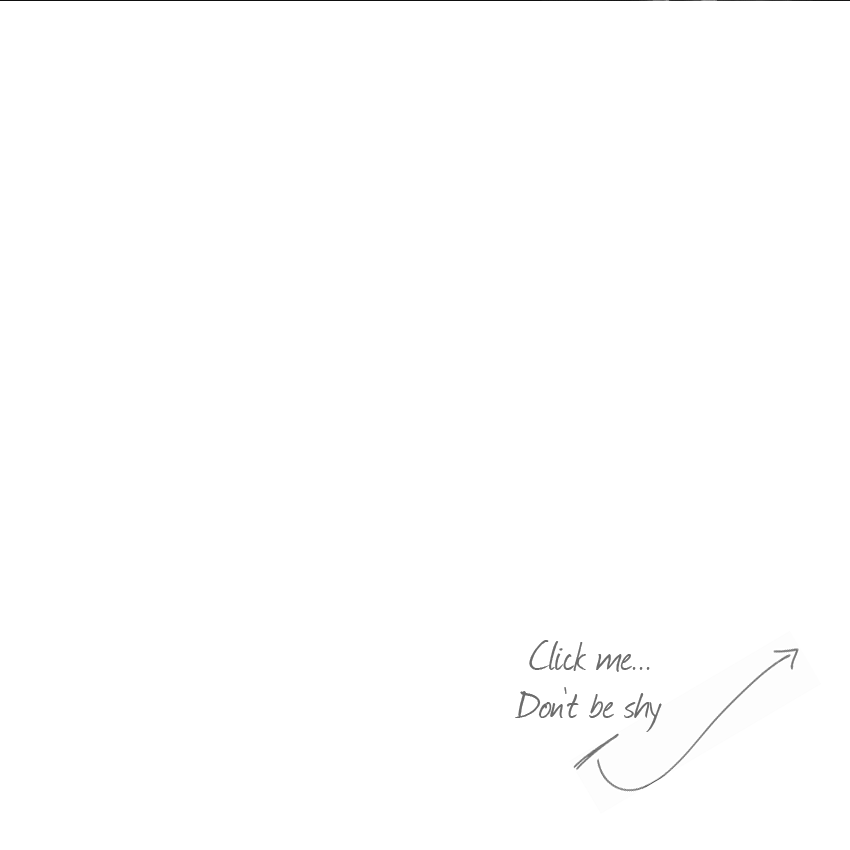
<style>
.page{position:relative;width:850px;height:850px;background:#ffffff}
.page>*{position:absolute;margin:0}
.t1{font:48px "Journal";color:#6c6c6c}
</style>
<div class="page">
<p class="t1" style="left:529px;top:639px;width:121px;height:32px">Click me...</p>
<p class="t1" style="left:515px;top:686px;width:147px;height:45px">Don’t be shy</p>
</div>
